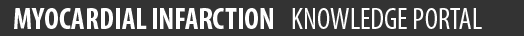
<style>
.page{position:relative;width:524px;height:36px;background:#333333}
.page>*{position:absolute;margin:0}
.t1{font:30px "MyriadPro-BoldCond";color:#ffffff}
.t2{font:30px "MyriadPro-Cond";color:#ffffff}
</style>
<div class="page">
<p class="t1" style="left:14px;top:8px;width:259px;height:21px">MYOCARDIAL INFARCTION</p>
<p class="t2" style="left:292px;top:8px;width:190px;height:21px">KNOWLEDGE PORTAL</p>
</div>
